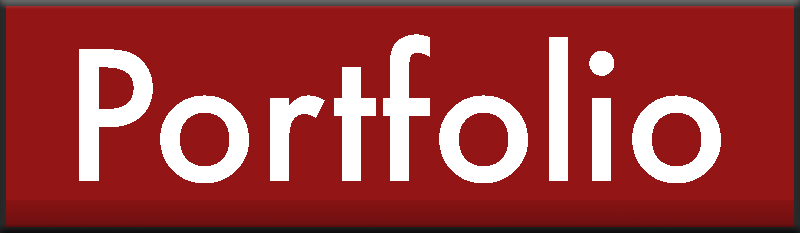
<style>
.page{position:relative;width:800px;height:233px;background:#941515}
.page>*{position:absolute;margin:0}
.t1{font:175px "Futura-Medium";color:#ffffff}
</style>
<div class="page">
<p class="t1" style="left:79px;top:34px;width:642px;height:149px">Portfolio</p>
</div>
